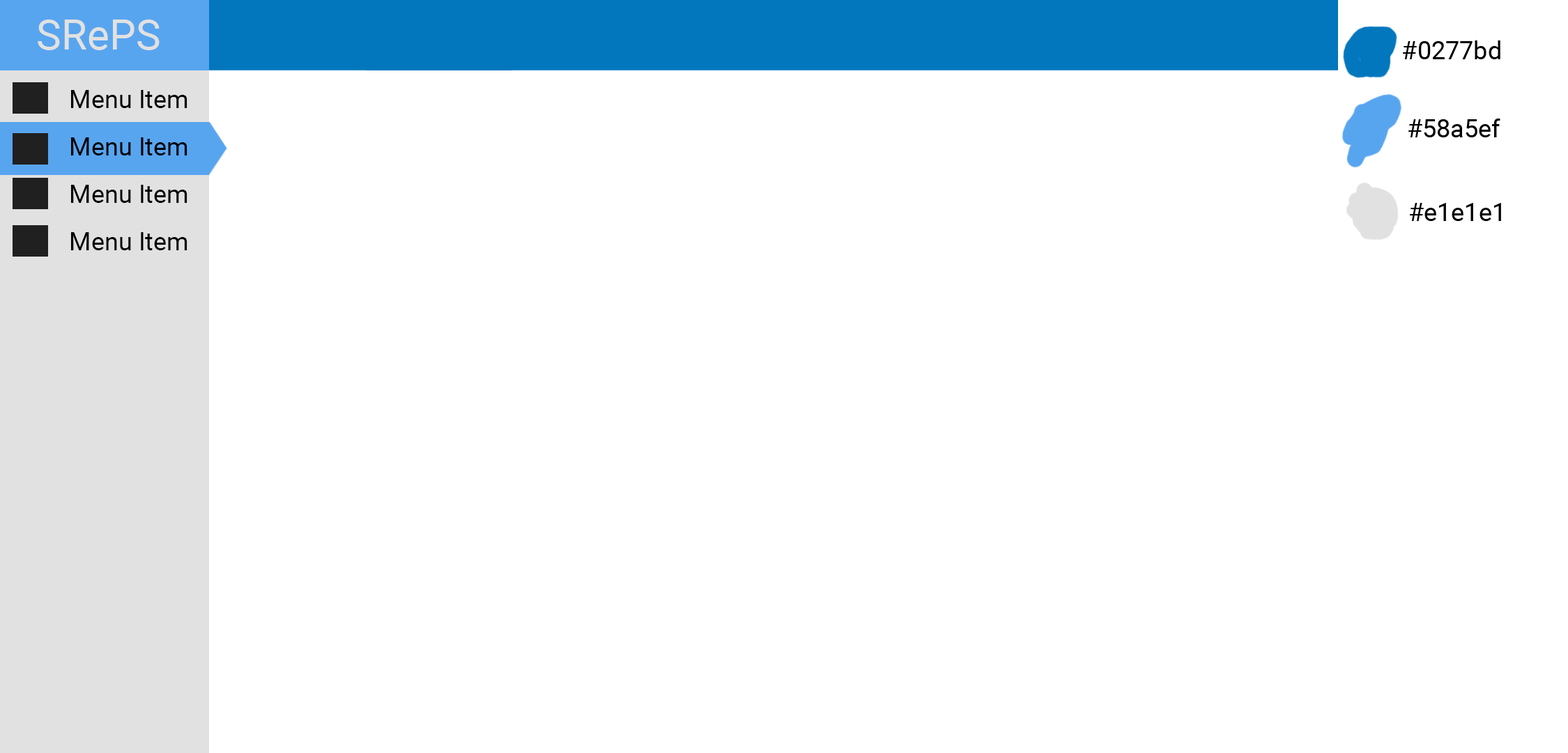
<style>
.page{position:relative;width:1568px;height:753px;background:#ffffff}
.page>*{position:absolute;margin:0}
.t1{font:41.8px "Roboto-Regular";color:#e1e1e1}
.t2{font:25.1px "Roboto-Regular";color:#000000}
</style>
<div class="page">
<p class="t1" style="left:38px;top:20px;width:122px;height:30px">SRePS</p>
<p class="t2" style="left:71px;top:90px;width:116px;height:18px">Menu Item</p>
<p class="t2" style="left:71px;top:137px;width:116px;height:18px">Menu Item</p>
<p class="t2" style="left:71px;top:185px;width:116px;height:18px">Menu Item</p>
<p class="t2" style="left:71px;top:232px;width:116px;height:18px">Menu Item</p>
</div>
